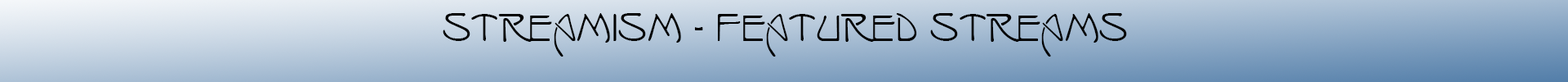
<style>
.page{position:relative;width:1568px;height:82px}
.page>*{position:absolute;margin:0}
.t1{font:49px "IsadoraCaps";color:#020202}
</style>
<div class="page">
<p class="t1" style="left:443px;top:13px;width:684px;height:43px">Streamism - Featured Streams</p>
</div>
